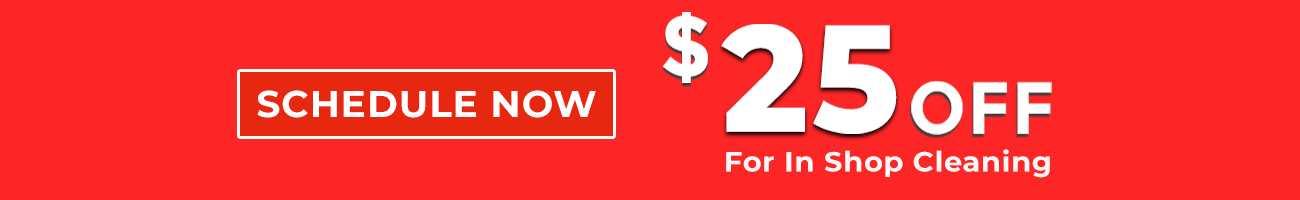
<style>
.page{position:relative;width:1300px;height:200px;background:#fd2626}
.page>*{position:absolute;margin:0}
.t1{font:86.3px "Montserrat-Bold";letter-spacing:0.025em;color:#ffffff;scale:0.95 1}
.t2{font:151.7px "Montserrat-ExtraBold";letter-spacing:0.025em;color:#ffffff;text-transform:uppercase;scale:0.95 1}
.t3{font:73.4px "Montserrat-Bold";letter-spacing:0.025em;color:#ffffff;text-transform:uppercase;scale:0.95 1}
.t4{font:37.1px "Montserrat-Bold";letter-spacing:0.025em;color:#ffffff}
.t5{font:27.9px "Montserrat-Bold";letter-spacing:0.025em;color:#f6f8f5;scale:1.03 1}
</style>
<div class="page">
<p class="t1" style="left:663px;top:12px;width:45px;height:71px">$</p>
<p class="t2" style="left:721px;top:24px;width:176px;height:110px">25</p>
<p class="t3" style="left:911px;top:81px;width:141px;height:54px">off</p>
<p class="t4" style="left:257px;top:90px;width:339px;height:28px">SCHEDULE NOW</p>
<p class="t5" style="left:726px;top:149px;width:324px;height:29px">For In Shop Cleaning</p>
</div>
